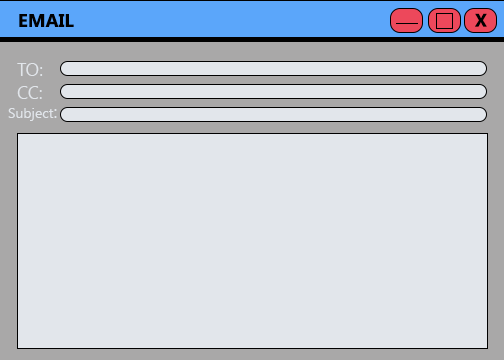
<style>
.page{position:relative;width:504px;height:360px;background:#e2e6eb}
.page>*{position:absolute;margin:0}
.t1{font:18.5px "SegoeUI-Bold";color:#000000}
.t2{font:18px "SegoeUI-Bold";color:#000000}
.t3{font:18px "SegoeUI";color:#e2e6eb}
.t4{font:14px "SegoeUI";color:#e2e6eb}
</style>
<div class="page">
<p class="t1" style="left:19px;top:14px;width:55px;height:13px">EMAIL</p>
<p class="t2" style="left:475px;top:13px;width:12px;height:14px">X</p>
<p class="t3" style="left:17px;top:63px;width:26px;height:13px">TO:</p>
<p class="t3" style="left:17px;top:86px;width:25px;height:13px">CC:</p>
<p class="t4" style="left:8px;top:108px;width:49px;height:13px">Subject<span class="t3">:</span></p>
</div>
